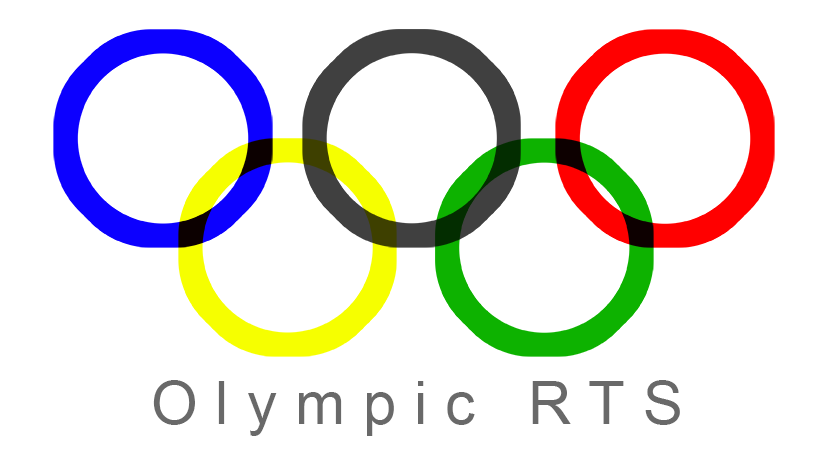
<style>
.page{position:relative;width:818px;height:456px;background:#ffffff}
.page>*{position:absolute;margin:0}
.t1{font:60px "ArialMT";letter-spacing:0.3em;color:#696969}
</style>
<div class="page">
<p class="t1" style="left:153px;top:380px;width:527px;height:56px">Olympic RTS</p>
</div>
